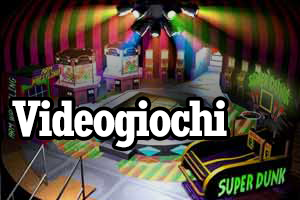
<style>
.page{position:relative;width:300px;height:200px}
.page>*{position:absolute;margin:0}
.t1{font:48px "RockwellNova-CondBold";letter-spacing:-0.05em;color:#ffffff}
</style>
<div class="page">
<p class="t1" style="left:12px;top:100px;width:215px;height:48px">Videogiochi</p>
</div>
